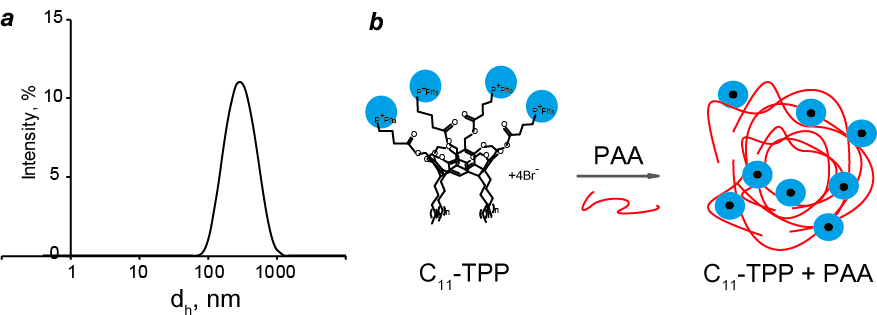
<style>
.page{position:relative;width:877px;height:315px;background:#ffffff}
.page>*{position:absolute;margin:0}
.t1{font:25px "Arial-BoldItalicMT";color:#000000}
.t2{font:25px "ArialUnicodeMS";color:#000000}
.t3{font:12.5px "ArialUnicodeMS";color:#000000}
</style>
<div class="page">
<p class="t1" style="left:0px;top:12px;width:14px;height:15px">a</p>
<p class="t1" style="left:369px;top:12px;width:14px;height:19px">b</p>
<p class="t2" style="left:595px;top:146px;width:49px;height:19px">PAA</p>
<p class="t3" style="left:509px;top:170px;width:27px;height:10px">+4Br</p>
<p class="t3" style="left:535px;top:169px;width:4px;height:1px">-</p>
<p class="t2" style="left:420px;top:263px;width:89px;height:27px">C11-TPP</p>
<p class="t2" style="left:704px;top:263px;width:170px;height:28px">C11-TPP + PAA</p>
<p class="t2" style="left:171px;top:289px;width:69px;height:27px">dh, nm</p>
</div>
